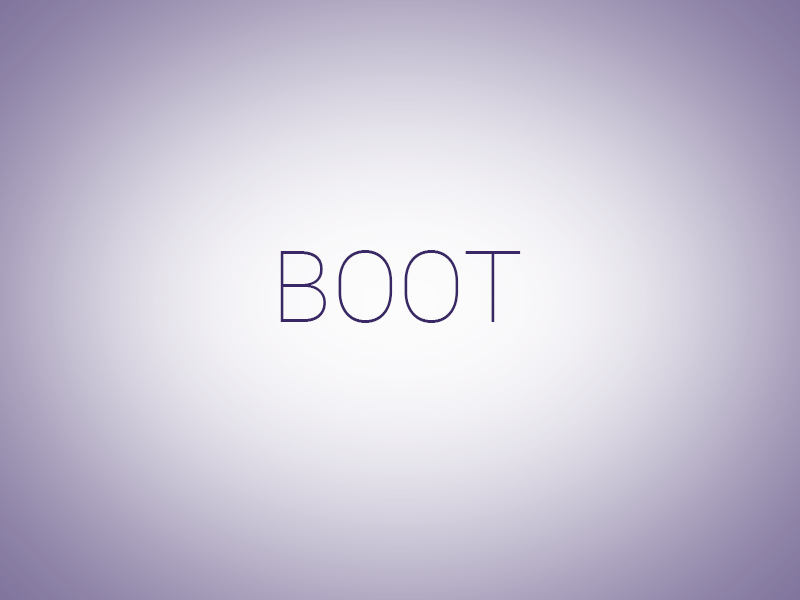
<style>
.page{position:relative;width:800px;height:600px}
.page>*{position:absolute;margin:0}
.t1{font:100px "Roboto-Thin";color:#3a2766;text-transform:uppercase}
</style>
<div class="page">
<p class="t1" style="left:280px;top:250px;width:241px;height:73px">boot</p>
</div>
